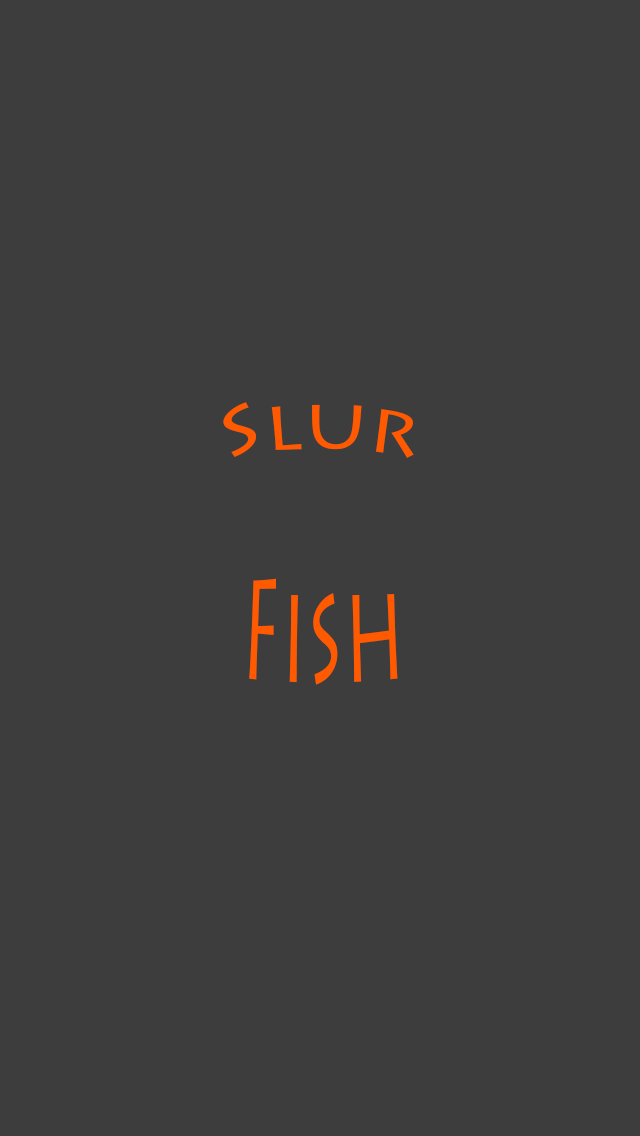
<style>
.page{position:relative;width:640px;height:1136px;background:#3d3d3d}
.page>*{position:absolute;margin:0}
.t1{font:72px "LithosPro-Regular";color:#ff5a00}
</style>
<div class="page">
<p class="t1" style="left:223px;top:402px;width:191px;height:56px">Slur</p>
<p class="t1" style="left:249px;top:578px;width:149px;height:107px">Fish</p>
</div>
